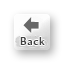
<style>
.page{position:relative;width:64px;height:64px;background:#ffffff}
.page>*{position:absolute;margin:0}
.t1{font:11px "AmiraParadiso";letter-spacing:0.05em;color:#424242}
</style>
<div class="page">
<p class="t1" style="left:20px;top:37px;width:25px;height:8px">Back</p>
</div>
